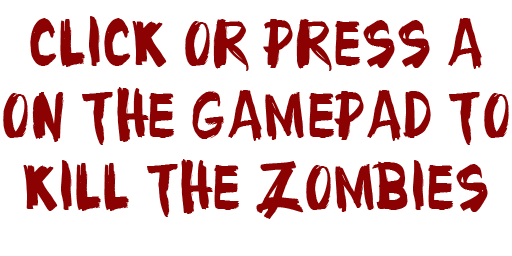
<style>
.page{position:relative;width:512px;height:256px;background:#ffffff}
.page>*{position:absolute;margin:0}
.t1{font:60px "CFMidnight-Regular";color:#8c0101}
</style>
<div class="page">
<p class="t1" style="left:3px;top:16px;width:506px;height:203px;text-align:center">CLICK OR PRESS A ON THE GAMEPAD TO KILL THE ZOMBIES</p>
</div>
